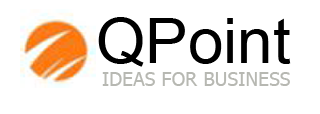
<style>
.page{position:relative;width:320px;height:114px;background:#ffffff}
.page>*{position:absolute;margin:0}
.t1{font:19.3px "Tahoma";color:#b7b8b2}
.t2{font:63.4px "ArialMT";color:#000000}
</style>
<div class="page">
<p class="t1" style="left:98px;top:17px;width:193px;height:69px"><span class="t2">QPoint<br></span>IDEAS FOR BUSINESS</p>
</div>
